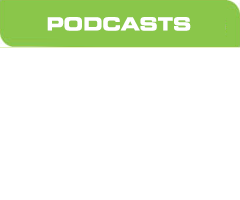
<style>
.page{position:relative;width:240px;height:200px;background:#ffffff}
.page>*{position:absolute;margin:0}
.t1{font:18px "Eurostile-BoldExtendedTwo";letter-spacing:-0.01em;color:#ffffff;text-transform:uppercase;font-weight:bold;scale:0.95 1}
</style>
<div class="page">
<p class="t1" style="left:47px;top:17px;width:144px;height:14px">Podcasts</p>
</div>
